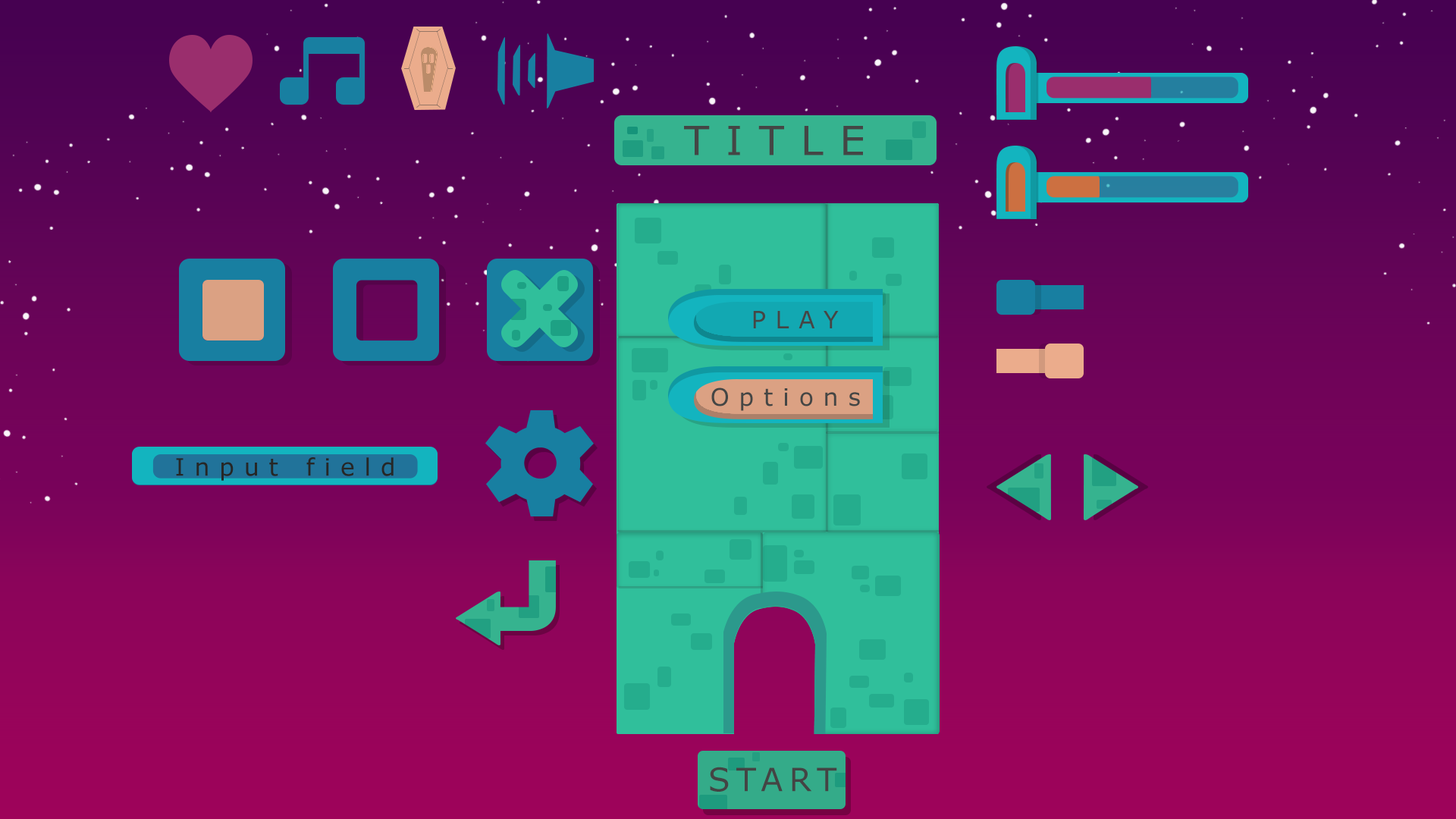
<style>
.page{position:relative;width:1456px;height:819px}
.page>*{position:absolute;margin:0}
.t1{font:40.1px "Verdana";letter-spacing:0.4em;color:#444645}
.t2{font:24.1px "Verdana";letter-spacing:0.4em;color:#444645}
.t3{font:24.1px "Verdana";letter-spacing:0.4em;color:#262726}
.t4{font:32.1px "Verdana";letter-spacing:0.2em;color:#444444}
</style>
<div class="page">
<p class="t1" style="left:684px;top:126px;width:179px;height:29px">TITLE</p>
<p class="t2" style="left:753px;top:311px;width:86px;height:17px">PLAY</p>
<p class="t2" style="left:711px;top:388px;width:149px;height:23px">Options</p>
<p class="t3" style="left:176px;top:457px;width:218px;height:24px">Input field</p>
<p class="t4" style="left:710px;top:767px;width:127px;height:25px">START</p>
</div>
